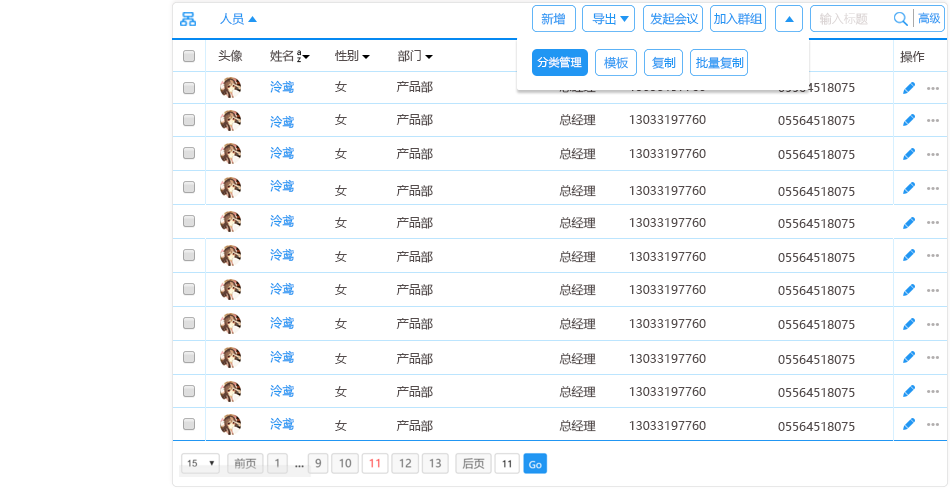
<style>
.page{position:relative;width:950px;height:495px;background:#ffffff}
.page>*{position:absolute;margin:0}
.t1{font:12px "MicrosoftYaHei";color:#2196f3}
.t2{font:12px "MicrosoftYaHei"}
.t3{font:12px "MicrosoftYaHeiLight";color:#dcd6d6}
.t4{font:11px "MicrosoftYaHei";color:#2196f3}
.t5{font:12px "MicrosoftYaHei";color:#544c4c}
.t6{font:8px "MicrosoftYaHei"}
.t7{font:11px "MicrosoftYaHei";color:#ffffff}
</style>
<div class="page">
<p class="t1" style="left:220px;top:13px;width:24px;height:12px">人员</p>
<p class="t2" style="left:541px;top:13px;width:24px;height:12px">新增</p>
<p class="t1" style="left:592px;top:13px;width:24px;height:12px">导出</p>
<p class="t1" style="left:650px;top:12px;width:49px;height:13px">发起会议</p>
<p class="t1" style="left:713px;top:12px;width:50px;height:13px">加入群组</p>
<p class="t3" style="left:819px;top:12px;width:49px;height:13px">输入标题</p>
<p class="t4" style="left:918px;top:12px;width:23px;height:12px">高级</p>
<p class="t5" style="left:218px;top:49px;width:25px;height:13px">头像</p>
<p class="t5" style="left:270px;top:50px;width:24px;height:12px">姓名</p>
<p class="t6" style="left:297px;top:50px;width:4px;height:6px">a</p>
<p class="t5" style="left:335px;top:50px;width:24px;height:11px">性别</p>
<p class="t5" style="left:397px;top:50px;width:24px;height:12px">部门</p>
<p class="t5" style="left:900px;top:50px;width:25px;height:13px">操作</p>
<p class="t6" style="left:297px;top:57px;width:4px;height:6px">z</p>
<p class="t7" style="left:537px;top:56px;width:45px;height:12px">分类管理</p>
<p class="t1" style="left:604px;top:56px;width:24px;height:13px">模板</p>
<p class="t1" style="left:652px;top:56px;width:24px;height:13px">复制</p>
<p class="t1" style="left:696px;top:56px;width:48px;height:13px">批量复制</p>
<p class="t1" style="left:270px;top:80px;width:24px;height:13px">泠鸢</p>
<p class="t5" style="left:335px;top:81px;width:12px;height:11px">女</p>
<p class="t5" style="left:396px;top:81px;width:37px;height:12px">产品部</p>
<p class="t5" style="left:778px;top:83px;width:77px;height:9px">05564518075</p>
<p class="t1" style="left:270px;top:115px;width:24px;height:13px">泠鸢</p>
<p class="t5" style="left:335px;top:114px;width:12px;height:11px">女</p>
<p class="t5" style="left:396px;top:114px;width:37px;height:12px">产品部</p>
<p class="t5" style="left:559px;top:114px;width:37px;height:12px">总经理</p>
<p class="t5" style="left:629px;top:115px;width:77px;height:9px">13033197760</p>
<p class="t5" style="left:778px;top:116px;width:77px;height:9px">05564518075</p>
<p class="t1" style="left:270px;top:146px;width:24px;height:13px">泠鸢</p>
<p class="t5" style="left:335px;top:148px;width:12px;height:11px">女</p>
<p class="t5" style="left:396px;top:148px;width:37px;height:12px">产品部</p>
<p class="t5" style="left:559px;top:148px;width:37px;height:12px">总经理</p>
<p class="t5" style="left:629px;top:149px;width:77px;height:9px">13033197760</p>
<p class="t5" style="left:778px;top:150px;width:77px;height:9px">05564518075</p>
<p class="t1" style="left:270px;top:179px;width:24px;height:13px">泠鸢</p>
<p class="t5" style="left:335px;top:185px;width:12px;height:11px">女</p>
<p class="t5" style="left:396px;top:185px;width:37px;height:12px">产品部</p>
<p class="t5" style="left:559px;top:185px;width:37px;height:12px">总经理</p>
<p class="t5" style="left:629px;top:186px;width:77px;height:9px">13033197760</p>
<p class="t5" style="left:778px;top:187px;width:77px;height:9px">05564518075</p>
<p class="t1" style="left:270px;top:214px;width:24px;height:13px">泠鸢</p>
<p class="t5" style="left:335px;top:217px;width:12px;height:11px">女</p>
<p class="t5" style="left:396px;top:217px;width:37px;height:12px">产品部</p>
<p class="t5" style="left:559px;top:217px;width:37px;height:12px">总经理</p>
<p class="t5" style="left:629px;top:218px;width:77px;height:9px">13033197760</p>
<p class="t5" style="left:778px;top:219px;width:77px;height:9px">05564518075</p>
<p class="t1" style="left:270px;top:248px;width:24px;height:13px">泠鸢</p>
<p class="t5" style="left:335px;top:251px;width:12px;height:11px">女</p>
<p class="t5" style="left:396px;top:251px;width:37px;height:12px">产品部</p>
<p class="t5" style="left:559px;top:251px;width:37px;height:12px">总经理</p>
<p class="t5" style="left:629px;top:252px;width:77px;height:9px">13033197760</p>
<p class="t5" style="left:778px;top:253px;width:77px;height:9px">05564518075</p>
<p class="t1" style="left:270px;top:282px;width:24px;height:13px">泠鸢</p>
<p class="t5" style="left:335px;top:284px;width:12px;height:11px">女</p>
<p class="t5" style="left:396px;top:284px;width:37px;height:12px">产品部</p>
<p class="t5" style="left:559px;top:284px;width:37px;height:12px">总经理</p>
<p class="t5" style="left:629px;top:285px;width:77px;height:9px">13033197760</p>
<p class="t5" style="left:778px;top:286px;width:77px;height:9px">05564518075</p>
<p class="t1" style="left:270px;top:316px;width:24px;height:13px">泠鸢</p>
<p class="t5" style="left:335px;top:318px;width:12px;height:11px">女</p>
<p class="t5" style="left:396px;top:318px;width:37px;height:12px">产品部</p>
<p class="t5" style="left:559px;top:318px;width:37px;height:12px">总经理</p>
<p class="t5" style="left:629px;top:319px;width:77px;height:9px">13033197760</p>
<p class="t5" style="left:778px;top:320px;width:77px;height:9px">05564518075</p>
<p class="t1" style="left:270px;top:350px;width:24px;height:13px">泠鸢</p>
<p class="t5" style="left:335px;top:353px;width:12px;height:11px">女</p>
<p class="t5" style="left:396px;top:353px;width:37px;height:12px">产品部</p>
<p class="t5" style="left:559px;top:353px;width:37px;height:12px">总经理</p>
<p class="t5" style="left:629px;top:354px;width:77px;height:9px">13033197760</p>
<p class="t5" style="left:778px;top:355px;width:77px;height:9px">05564518075</p>
<p class="t1" style="left:270px;top:384px;width:24px;height:13px">泠鸢</p>
<p class="t5" style="left:335px;top:386px;width:12px;height:11px">女</p>
<p class="t5" style="left:396px;top:386px;width:37px;height:12px">产品部</p>
<p class="t5" style="left:559px;top:386px;width:37px;height:12px">总经理</p>
<p class="t5" style="left:629px;top:387px;width:77px;height:9px">13033197760</p>
<p class="t5" style="left:778px;top:388px;width:77px;height:9px">05564518075</p>
<p class="t1" style="left:270px;top:417px;width:24px;height:13px">泠鸢</p>
<p class="t5" style="left:335px;top:420px;width:12px;height:11px">女</p>
<p class="t5" style="left:396px;top:420px;width:37px;height:12px">产品部</p>
<p class="t5" style="left:559px;top:420px;width:37px;height:12px">总经理</p>
<p class="t5" style="left:629px;top:421px;width:77px;height:9px">13033197760</p>
<p class="t5" style="left:778px;top:422px;width:77px;height:9px">05564518075</p>
</div>
